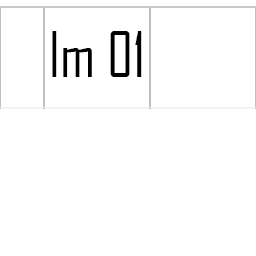
<style>
.page{position:relative;width:256px;height:256px;background:#ffffff}
.page>*{position:absolute;margin:0}
.t1{font:60px "AgencyFB-Reg";color:#000000}
</style>
<div class="page">
<p class="t1" style="left:52px;top:31px;width:90px;height:46px">lm 01</p>
</div>
